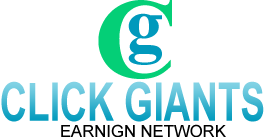
<style>
.page{position:relative;width:265px;height:137px;background:#ffffff}
.page>*{position:absolute;margin:0}
.t1{font:113.7px "TimesNewRomanPS-BoldMT";color:#04cf77}
.t2{font:75px "TimesNewRomanPS-BoldMT";color:#0099bc}
.t3{font:53.3px "Arial-BoldMT";scale:0.7 1}
.t4{font:16.7px "ArialMT";color:#000000}
</style>
<div class="page">
<p class="t1" style="left:98px;top:0px;width:74px;height:79px">C</p>
<p class="t2" style="left:128px;top:13px;width:34px;height:52px">g</p>
<p class="t3" style="left:1px;top:81px;width:263px;height:41px">CLICK GIANTS</p>
<p class="t4" style="left:61px;top:124px;width:165px;height:14px">EARNIGN NETWORK</p>
</div>
